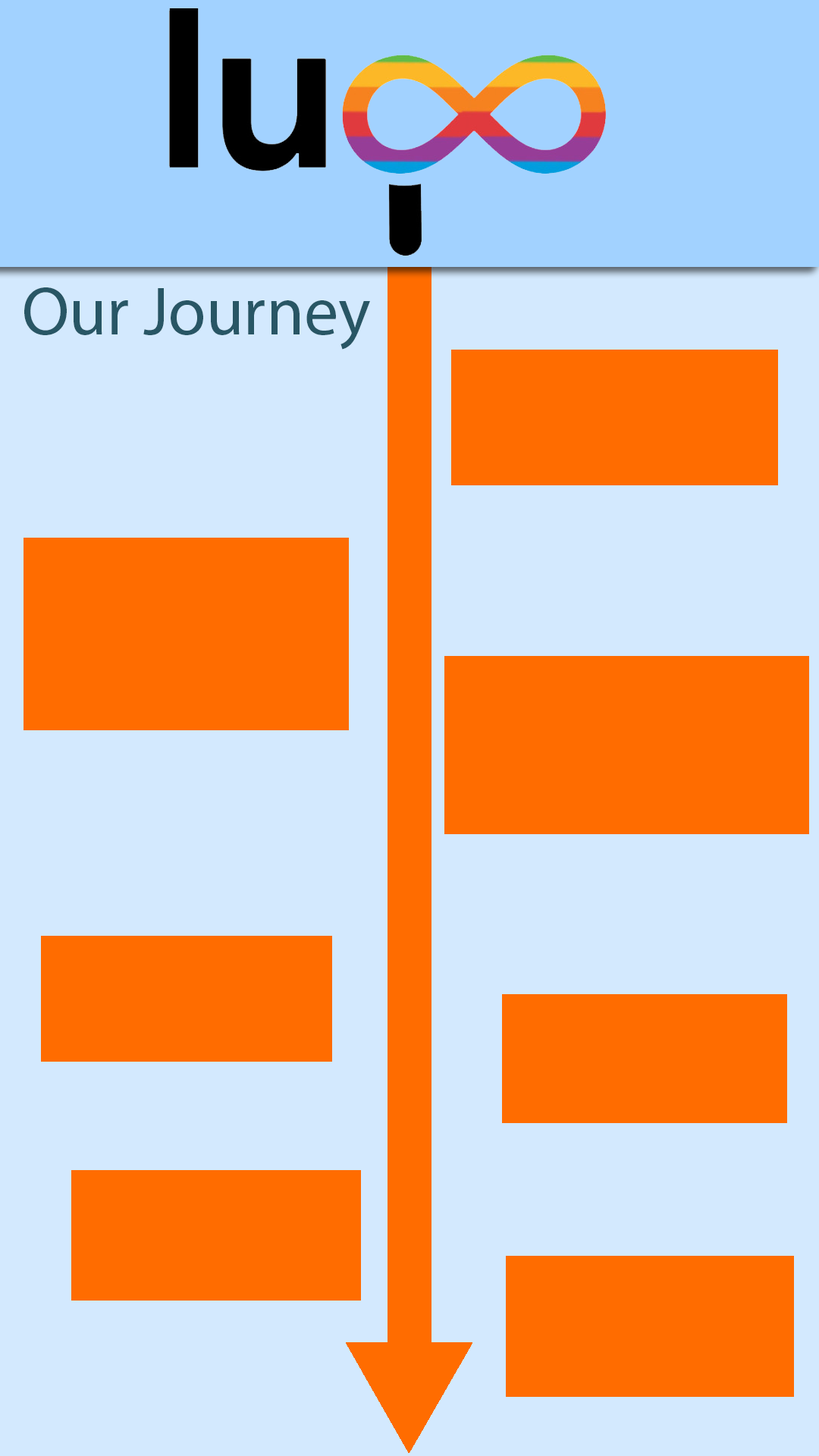
<style>
.page{position:relative;width:819px;height:1456px;background:#d3e9fe}
.page>*{position:absolute;margin:0}
.t1{font:68.2px "MyriadPro-Regular";color:#285665}
</style>
<div class="page">
<p class="t1" style="left:24px;top:287px;width:346px;height:63px">Our Journey</p>
</div>
